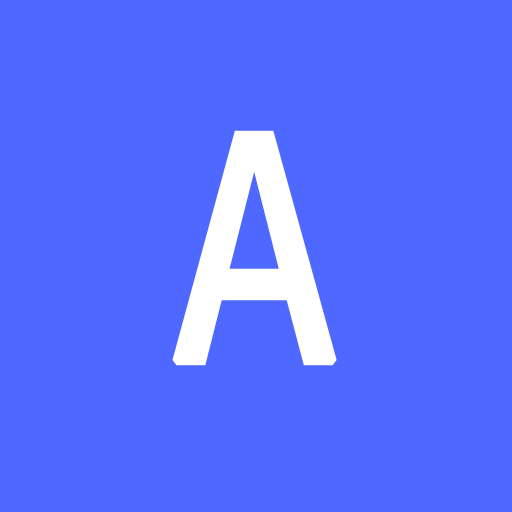
<style>
.page{position:relative;width:512px;height:512px;background:#4f68ff}
.page>*{position:absolute;margin:0}
.t1{font:300px "#9Slide03SwissCondensed-Regular";letter-spacing:-0.025em;color:#ffffff;font-weight:bold}
</style>
<div class="page">
<p class="t1" style="left:172px;top:130px;width:165px;height:236px">A</p>
</div>
